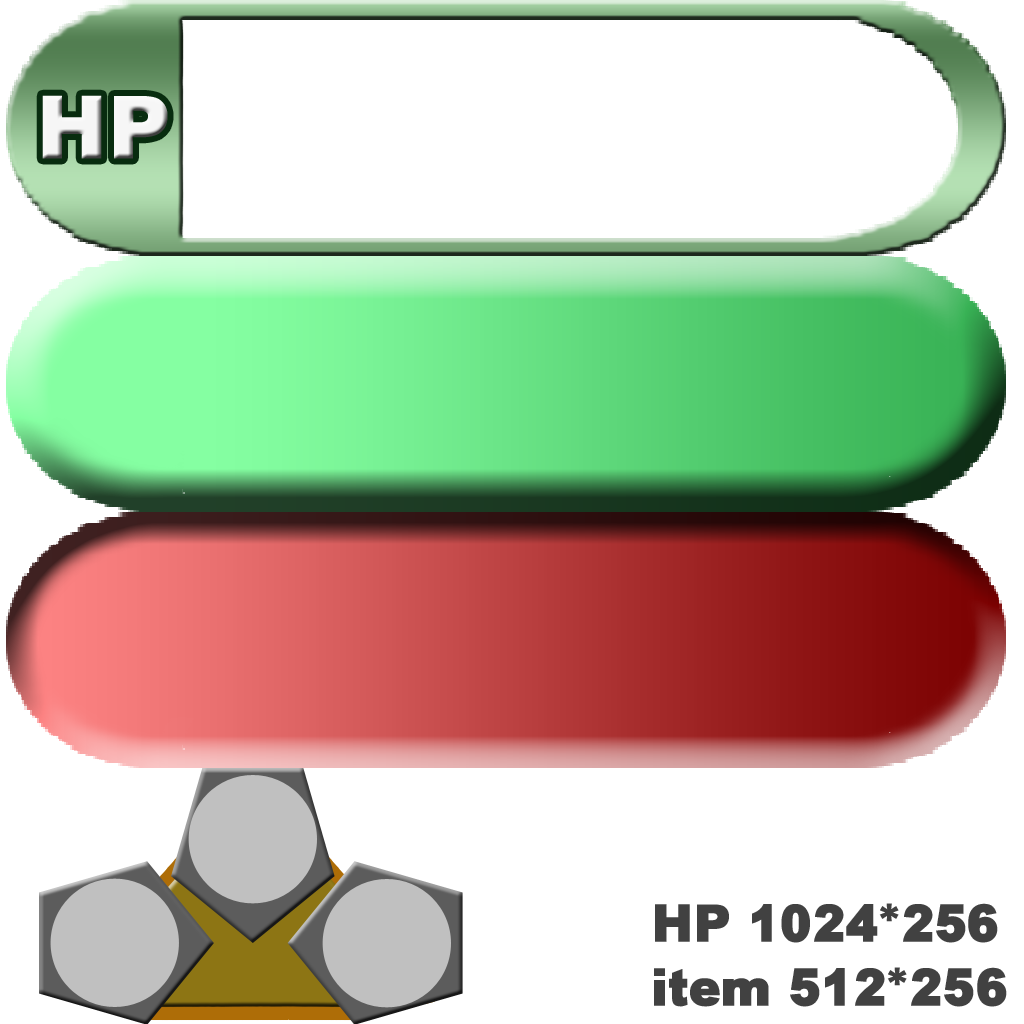
<style>
.page{position:relative;width:1024px;height:1024px;background:#ffffff}
.page>*{position:absolute;margin:0}
.t1{font:89.8px "DHPGothic-EB-WIN-RKSJ-H";color:#f5f5f5}
.t2{font:53.4px/64.1px "DHPGothic-EB-WIN-RKSJ-H";color:#414141}
</style>
<div class="page">
<p class="t1" style="left:42px;top:95px;width:126px;height:64px">HP</p>
<p class="t2" style="left:654px;top:903px;width:353px;height:104px">HP 1024*256<br>item 512*256</p>
</div>
